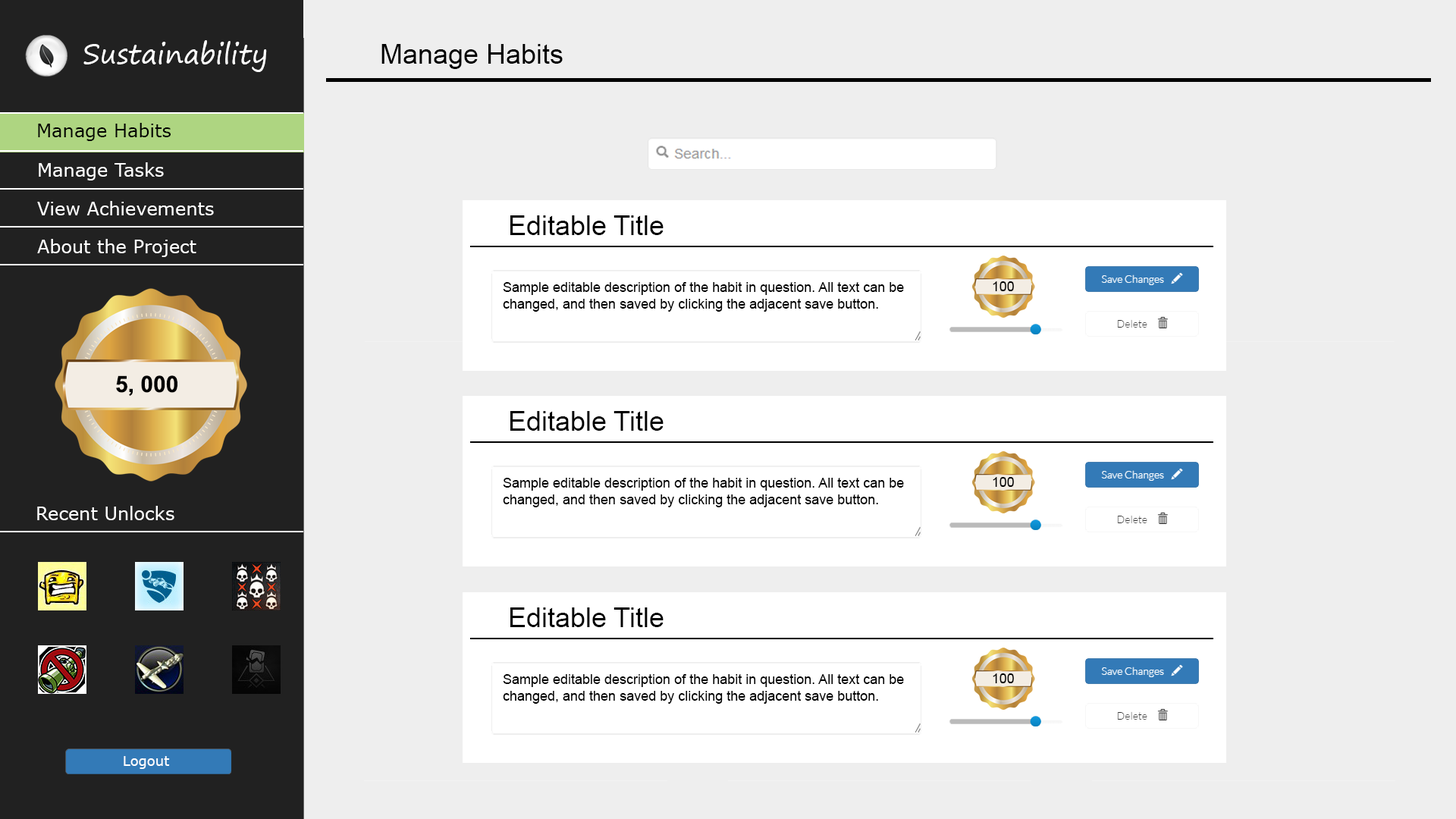
<style>
.page{position:relative;width:1456px;height:819px;background:#eeeeee}
.page>*{position:absolute;margin:0}
.t1{font:27.3px "SegoePrint";color:#ffffff}
.t2{font:27.3px "ArialMT";color:#000000}
.t3{font:27.3px "ArialMT";color:#eeeeee}
.t4{font:18.2px "Verdana";color:#000000}
.t5{font:18.2px "Verdana";color:#ffffff}
.t6{font:13.6px "ArialMT";color:#000000}
.t7{font:22.7px "Arial-BoldMT";color:#000000}
.t8{font:13.6px "Verdana";color:#ffffff}
</style>
<div class="page">
<p class="t1" style="left:83px;top:40px;width:184px;height:32px">Sustainability</p>
<p class="t2" style="left:381px;top:44px;width:365px;height:25px">Manage Habits<span class="t3">Manage Habits</span></p>
<p class="t4" style="left:38px;top:123px;width:133px;height:18px">Manage Habits</p>
<p class="t5" style="left:39px;top:162px;width:125px;height:18px">Manage Tasks</p>
<p class="t5" style="left:37px;top:201px;width:177px;height:14px">View Achievements</p>
<p class="t2" style="left:510px;top:215px;width:154px;height:20px">Editable Title</p>
<p class="t5" style="left:37px;top:239px;width:159px;height:18px">About the Project</p>
<p class="t6" style="left:993px;top:281px;width:21px;height:10px">100</p>
<p class="t6" style="left:503px;top:282px;width:401px;height:30px">Sample editable description of the habit in question. All text can be<br>changed, and then saved by clicking the adjacent save button.</p>
<p class="t7" style="left:116px;top:375px;width:61px;height:21px">5, 000</p>
<p class="t2" style="left:510px;top:411px;width:154px;height:20px">Editable Title</p>
<p class="t6" style="left:503px;top:478px;width:401px;height:29px">Sample editable description of the habit in question. All text can be<br>changed, and then saved by clicking the adjacent save button.</p>
<p class="t6" style="left:993px;top:477px;width:21px;height:10px">100</p>
<p class="t5" style="left:37px;top:506px;width:137px;height:14px">Recent Unlocks</p>
<p class="t2" style="left:510px;top:607px;width:154px;height:20px">Editable Title</p>
<p class="t6" style="left:503px;top:674px;width:401px;height:30px">Sample editable description of the habit in question. All text can be<br>changed, and then saved by clicking the adjacent save button.</p>
<p class="t6" style="left:993px;top:673px;width:21px;height:10px">100</p>
<p class="t8" style="left:124px;top:756px;width:46px;height:13px">Logout</p>
</div>
